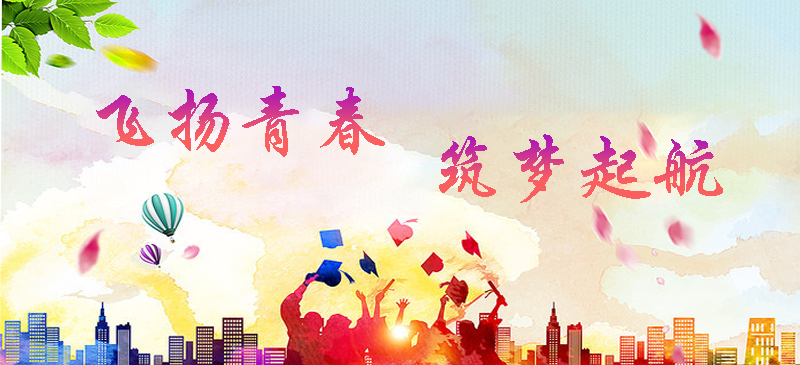
<style>
.page{position:relative;width:800px;height:365px}
.page>*{position:absolute;margin:0}
.t1{font:75px "STXingkai"}
</style>
<div class="page">
<p class="t1" style="left:96px;top:86px;width:289px;height:71px">飞扬青春</p>
<p class="t1" style="left:439px;top:134px;width:284px;height:69px">筑梦起航</p>
</div>
